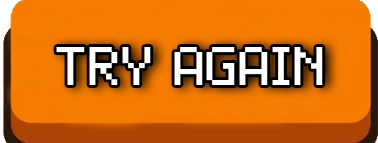
<style>
.page{position:relative;width:378px;height:143px}
.page>*{position:absolute;margin:0}
.t1{font:112px "2005_iannnnnAMD";color:#ffffff}
</style>
<div class="page">
<p class="t1" style="left:56px;top:47px;width:267px;height:38px">TRY AGAIN</p>
</div>
